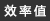
<style>
.page{position:relative;width:50px;height:21px;background:#333333}
.page>*{position:absolute;margin:0}
.t1{font:11.7px "MicrosoftYaHei";letter-spacing:0.24em;color:#ffffff;font-weight:bold}
</style>
<div class="page">
<p class="t1" style="left:4px;top:4px;width:42px;height:13px">效率值</p>
</div>
